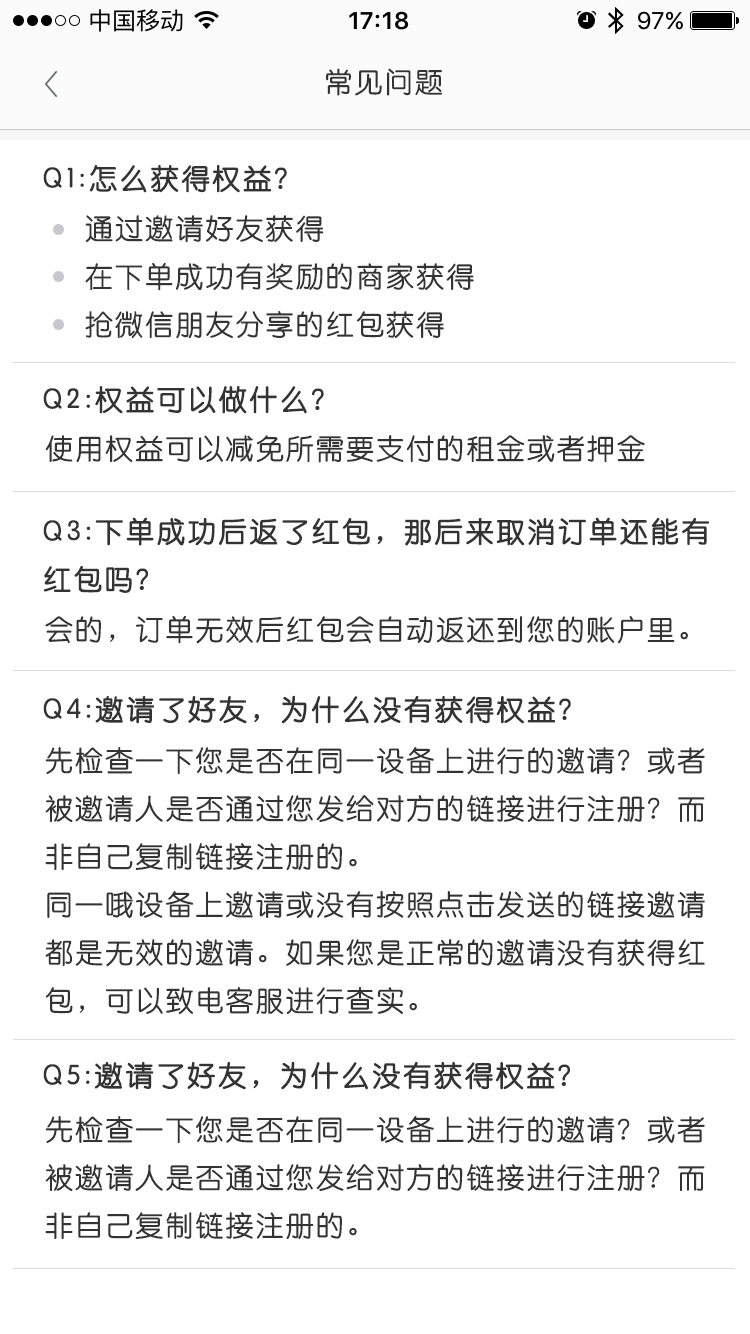
<style>
.page{position:relative;width:750px;height:1334px;background:#ffffff}
.page>*{position:absolute;margin:0}
.t1{font:28px "STYuanti-SC-Regular";letter-spacing:0.075em;color:#333333}
.t2{font:28px "STYuanti-SC-Regular";letter-spacing:0.075em;color:#333333;font-weight:bold}
.t3{font:28px/48px "STYuanti-SC-Regular";letter-spacing:0.075em;color:#333333}
.t4{font:28px/48px "STYuanti-SC-Regular";letter-spacing:0.075em;color:#333333;font-weight:bold}
</style>
<div class="page">
<p class="t1" style="left:326px;top:68px;width:116px;height:28px">常见问题</p>
<p class="t2" style="left:43px;top:165px;width:244px;height:28px">Q1:怎么获得权益？</p>
<p class="t3" style="left:85px;top:215px;width:389px;height:124px">通过邀请好友获得<br>在下单成功有奖励的商家获得<br>抢微信朋友分享的红包获得</p>
<p class="t2" style="left:43px;top:386px;width:281px;height:28px">Q2:权益可以做什么？</p>
<p class="t1" style="left:45px;top:435px;width:600px;height:28px">使用权益可以减免所需要支付的租金或者押金</p>
<p class="t4" style="left:43px;top:517px;width:666px;height:76px">Q3:下单成功后返了红包，那后来取消订单还能有<br>红包吗？</p>
<p class="t1" style="left:45px;top:616px;width:643px;height:28px">会的，订单无效后红包会自动返还到您的账户里。</p>
<p class="t2" style="left:43px;top:695px;width:528px;height:29px">Q4:邀请了好友，为什么没有获得权益？</p>
<p class="t3" style="left:45px;top:747px;width:660px;height:268px">先检查一下您是否在同一设备上进行的邀请？或者<br>被邀请人是否通过您发给对方的链接进行注册？而<br>非自己复制链接注册的。<br>同一哦设备上邀请或没有按照点击发送的链接邀请<br>都是无效的邀请。如果您是正常的邀请没有获得红<br>包，可以致电客服进行查实。</p>
<p class="t2" style="left:43px;top:1061px;width:527px;height:29px">Q5:邀请了好友，为什么没有获得权益？</p>
<p class="t3" style="left:45px;top:1116px;width:660px;height:123px">先检查一下您是否在同一设备上进行的邀请？或者<br>被邀请人是否通过您发给对方的链接进行注册？而<br>非自己复制链接注册的。</p>
</div>
